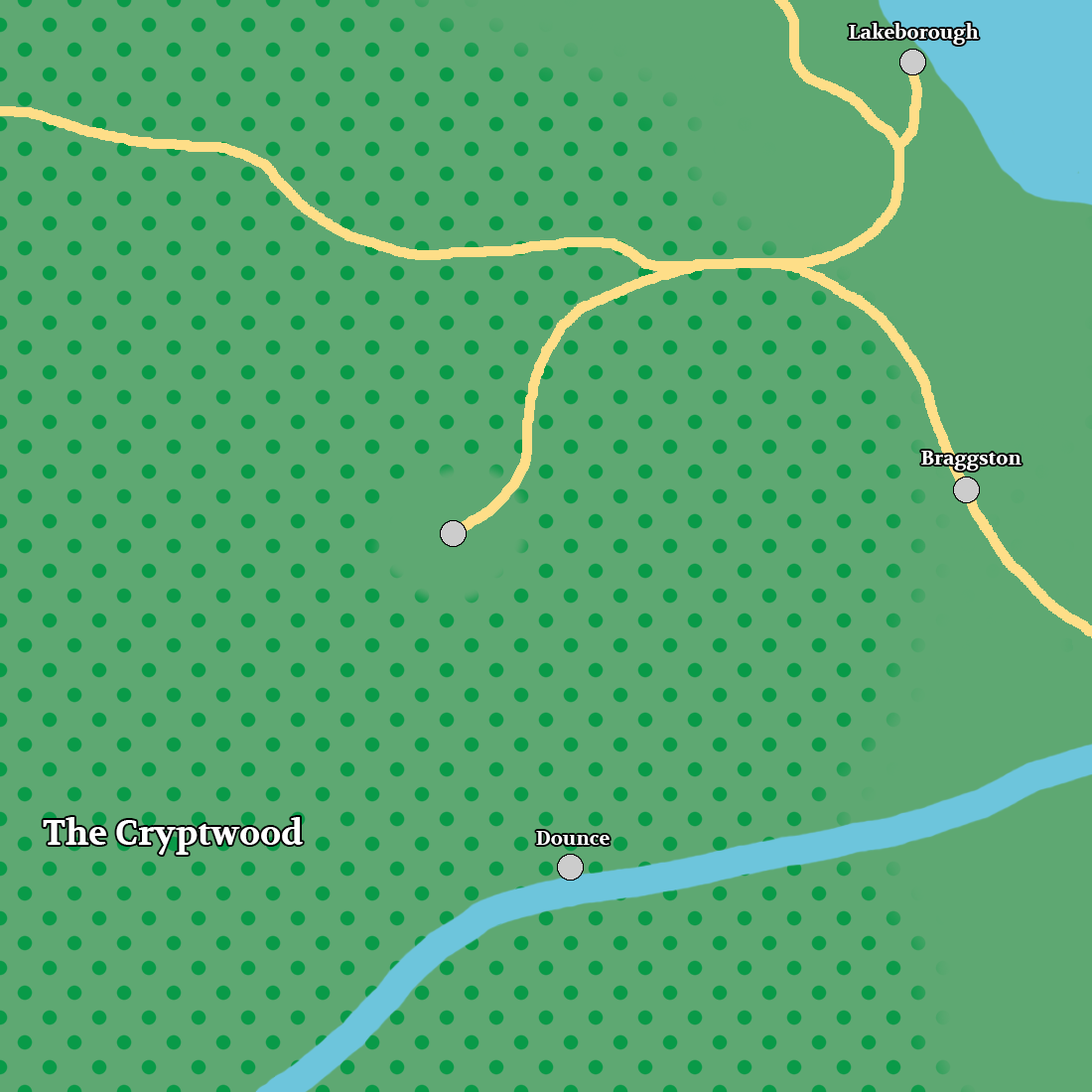
<style>
.page{position:relative;width:1092px;height:1092px;background:#5ea872}
.page>*{position:absolute;margin:0}
.t1{font:19.9px "Volkhov-Bold";color:#ffffff}
.t2{font:34.7px "Volkhov-Bold";color:#ffffff}
</style>
<div class="page">
<p class="t1" style="left:849px;top:23px;width:130px;height:22px">Lakeborough</p>
<p class="t1" style="left:921px;top:451px;width:101px;height:20px">Braggston</p>
<p class="t2" style="left:43px;top:817px;width:260px;height:38px">The Cryptwood</p>
<p class="t1" style="left:536px;top:831px;width:74px;height:14px">Dounce</p>
</div>
